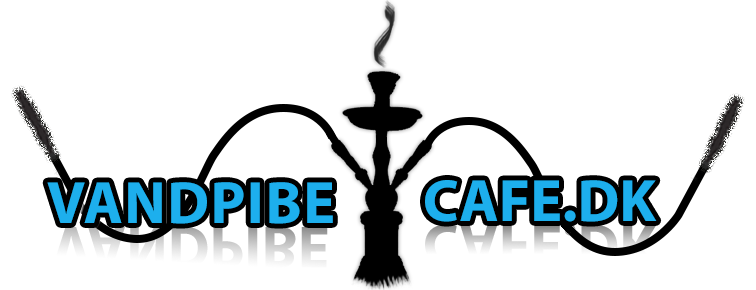
<style>
.page{position:relative;width:756px;height:290px;background:#ffffff}
.page>*{position:absolute;margin:0}
.t1{font:60px "MyriadPro-Bold";letter-spacing:0.025em;color:#1dafed}
.t2{font:60px "MyriadPro-Bold";color:#1dafed}
</style>
<div class="page">
<p class="t1" style="left:47px;top:182px;width:286px;height:42px">VANDPIBE</p>
<p class="t2" style="left:425px;top:180px;width:232px;height:42px">CAFE.DK</p>
</div>
